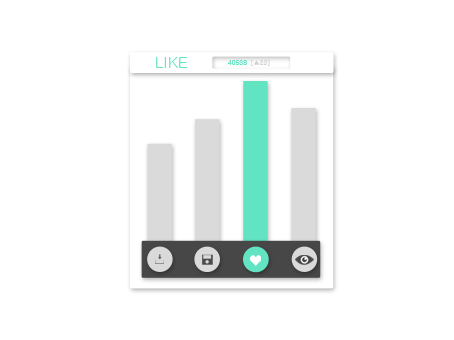
<style>
.page{position:relative;width:454px;height:340px;background:#ffffff}
.page>*{position:absolute;margin:0}
.t1{font:16px "Gulim";color:#62e4c3}
.t2{font:6.6px "Gulim";color:#62e4c3}
.t3{font:6.6px "Gulim";color:#d2d2d2}
</style>
<div class="page">
<p class="t1" style="left:156px;top:57px;width:32px;height:11px">LIKE</p>
<p class="t2" style="left:227px;top:60px;width:20px;height:5px">40538</p>
<p class="t3" style="left:251px;top:60px;width:19px;height:6px">[▲23]</p>
</div>
